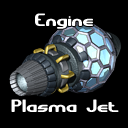
<style>
.page{position:relative;width:128px;height:128px;background:#000000}
.page>*{position:absolute;margin:0}
.t1{font:18px "GravitateBRK";color:#ffffff}
</style>
<div class="page">
<p class="t1" style="left:35px;top:13px;width:58px;height:16px">Engine</p>
<p class="t1" style="left:11px;top:99px;width:108px;height:13px">Plasma Jet</p>
</div>
